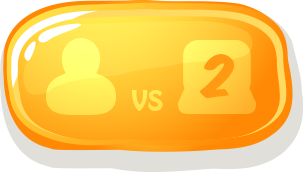
<style>
.page{position:relative;width:303px;height:172px}
.page>*{position:absolute;margin:0}
.t1{font:50px "KomikaAxis";color:#ff9b12}
.t2{font:31.5px "HoboStd";color:#ffe855}
</style>
<div class="page">
<p class="t1" style="left:200px;top:54px;width:35px;height:45px">2</p>
<p class="t2" style="left:132px;top:90px;width:31px;height:21px">vs</p>
</div>
